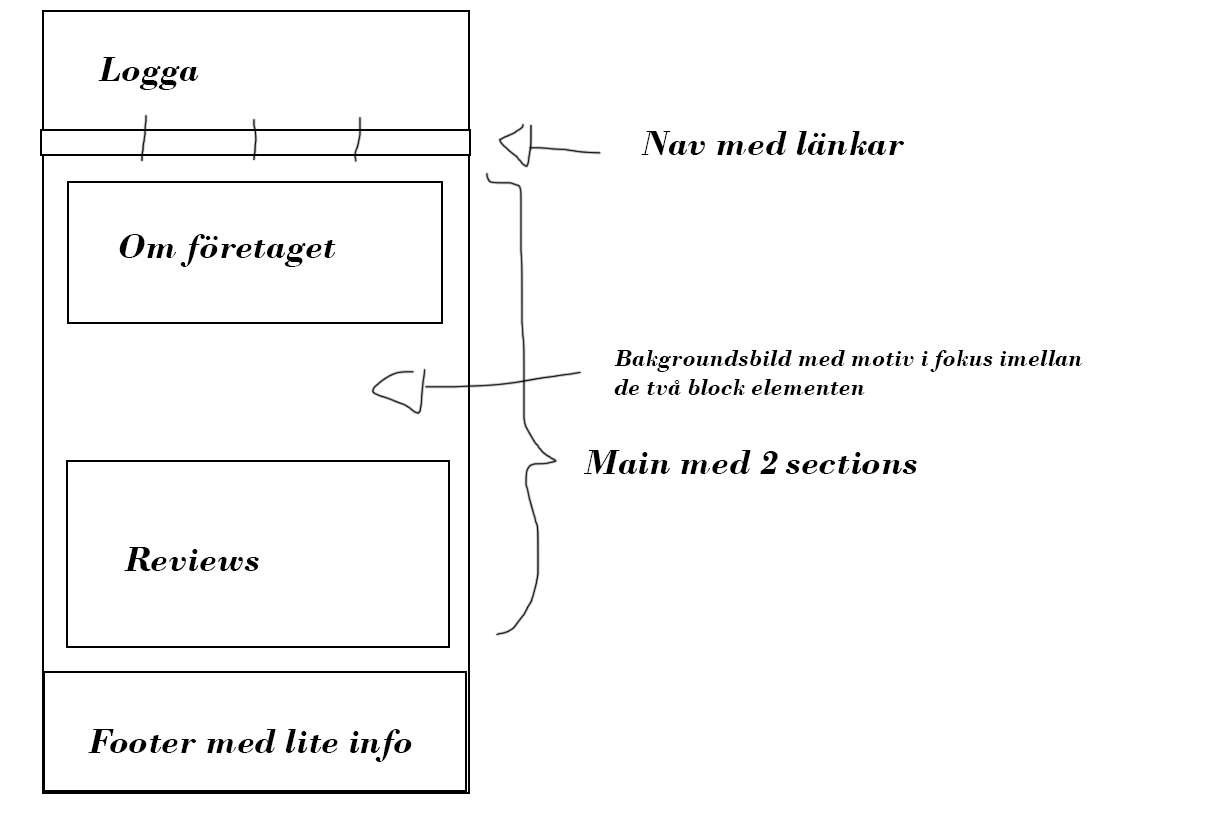
<style>
.page{position:relative;width:1224px;height:816px;background:#ffffff}
.page>*{position:absolute;margin:0}
.t1{font:36px "BodoniMT-BoldItalic";color:#000000}
.t2{font:24px "BodoniMT-BoldItalic";color:#000000}
</style>
<div class="page">
<p class="t1" style="left:98px;top:57px;width:101px;height:33px">Logga</p>
<p class="t1" style="left:641px;top:131px;width:263px;height:24px">Nav med länkar</p>
<p class="t1" style="left:119px;top:234px;width:217px;height:33px">Om företaget</p>
<p class="t2" style="left:614px;top:350px;width:468px;height:45px">Bakgroundsbild med motiv i fokus imellan<br>de två block elementen</p>
<p class="t1" style="left:583px;top:450px;width:334px;height:24px">Main med 2 sections</p>
<p class="t1" style="left:124px;top:547px;width:135px;height:24px">Reviews</p>
<p class="t1" style="left:88px;top:729px;width:324px;height:33px">Footer med lite info</p>
</div>
